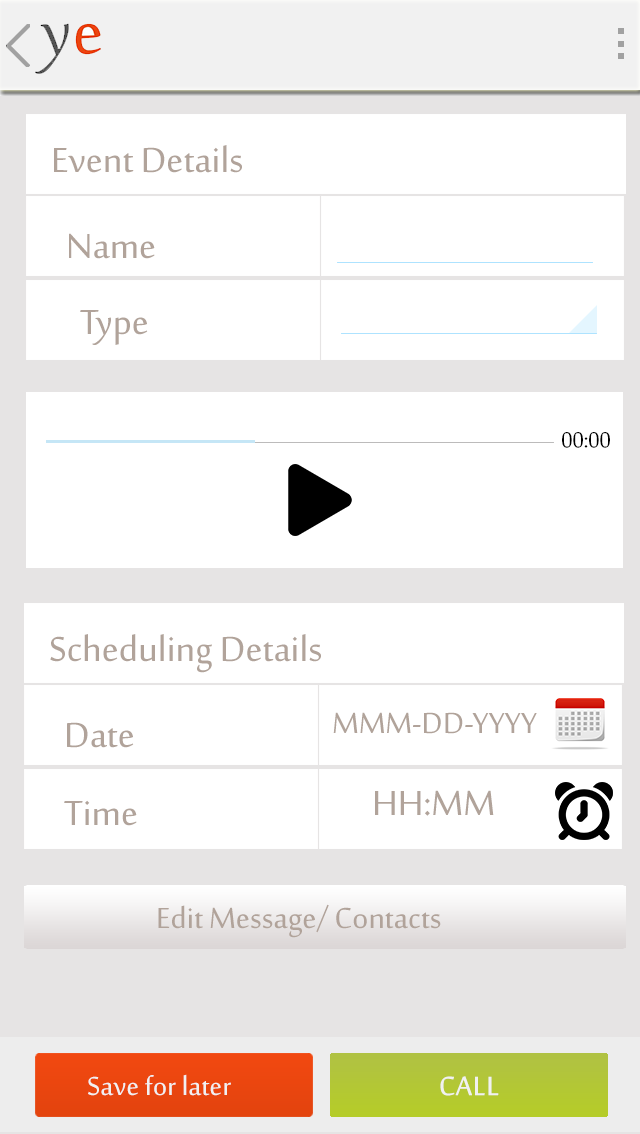
<style>
.page{position:relative;width:640px;height:1134px;background:#ffffff}
.page>*{position:absolute;margin:0}
.t1{font:48px "SakkalMajalla";color:#b1a39a}
.t2{font:30.5px "SakkalMajalla";color:#000000;scale:0.91 1}
.t3{font:40px "SakkalMajalla";color:#b1a39a}
.t4{font:36px "SakkalMajalla";color:#f1f1f1}
.t5{font:36px "SakkalMajalla";color:#f1f1f1;font-weight:bold}
</style>
<div class="page">
<p class="t1" style="left:54px;top:145px;width:188px;height:28px">Event Details</p>
<p class="t1" style="left:69px;top:233px;width:86px;height:26px">Name</p>
<p class="t1" style="left:80px;top:310px;width:68px;height:35px">Type</p>
<p class="t2" style="left:562px;top:432px;width:48px;height:16px">00:00</p>
<p class="t1" style="left:50px;top:634px;width:271px;height:39px">Scheduling Details</p>
<p class="t3" style="left:333px;top:712px;width:204px;height:22px">MMM-DD-YYYY</p>
<p class="t1" style="left:67px;top:722px;width:67px;height:26px">Date</p>
<p class="t1" style="left:375px;top:790px;width:119px;height:26px">HH:MM</p>
<p class="t1" style="left:64px;top:800px;width:73px;height:26px">Time</p>
<p class="t3" style="left:158px;top:904px;width:283px;height:34px">Edit Message/ Contacts</p>
<p class="t4" style="left:88px;top:1074px;width:143px;height:22px">Save for later</p>
<p class="t5" style="left:440px;top:1076px;width:59px;height:20px">CALL</p>
</div>
